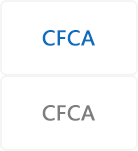
<style>
.page{position:relative;width:138px;height:151px;background:#ffffff}
.page>*{position:absolute;margin:0}
.t1{font:20px "MicrosoftYaHei";color:#096dc1;font-weight:bold}
.t2{font:20px "MicrosoftYaHei";color:#7d7d7d;font-weight:bold}
</style>
<div class="page">
<p class="t1" style="left:42px;top:30px;width:53px;height:16px">CFCA</p>
<p class="t2" style="left:42px;top:105px;width:53px;height:16px">CFCA</p>
</div>
